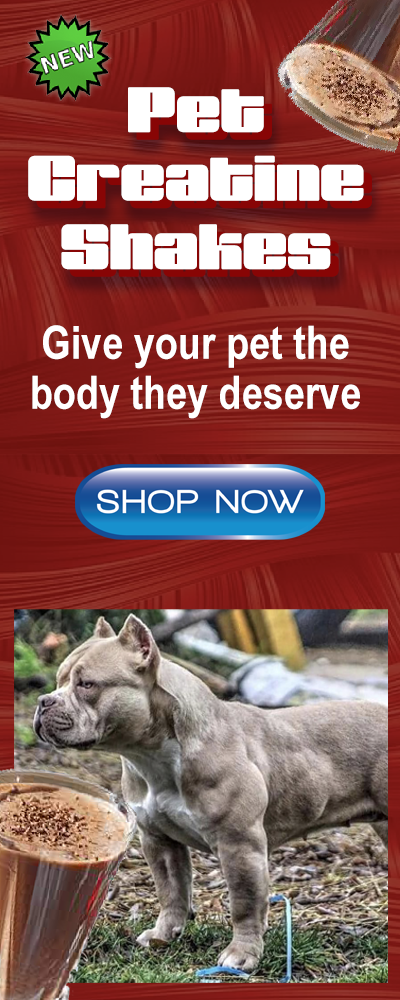
<style>
.page{position:relative;width:400px;height:1000px}
.page>*{position:absolute;margin:0}
.t1{font:75.2px/68.5px "Muscle-Narrow";color:#ffffff}
.t2{font:75.2px/68.5px "Muscle-Narrow"}
.t3{font:46px/50px "ArialNarrow-Bold";color:#ffffff}
</style>
<div class="page">
<p class="t1" style="left:28px;top:87px;width:336px;height:183px;text-align:center">Pet<br>Creatine Shakes</p>
<p class="t2" style="left:36px;top:94px;width:336px;height:183px;text-align:center">Pet<br>Creatine Shakes</p>
<p class="t3" style="left:32px;top:325px;width:328px;height:94px;text-align:center">Give your pet the body they deserve</p>
</div>
